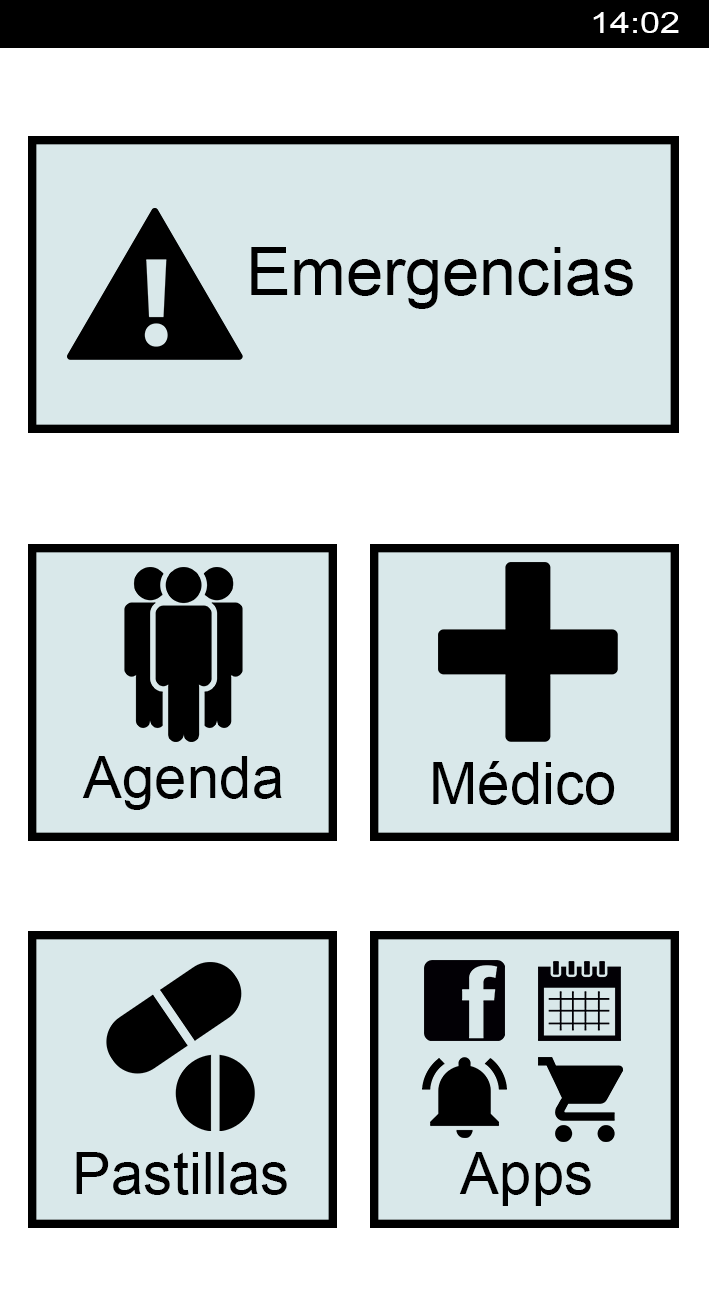
<style>
.page{position:relative;width:709px;height:1299px;background:#d9e8ea}
.page>*{position:absolute;margin:0}
.t1{font:29.2px "ArialMT";color:#ffffff;scale:1.22 1}
.t2{font:66.7px "ArialMT";color:#000000}
.t3{font:58.3px "ArialMT";color:#000000}
</style>
<div class="page">
<p class="t1" style="left:593px;top:12px;width:86px;height:21px">14:02</p>
<p class="t2" style="left:251px;top:247px;width:382px;height:62px">Emergencias</p>
<p class="t3" style="left:82px;top:756px;width:200px;height:54px">Agenda</p>
<p class="t3" style="left:433px;top:761px;width:182px;height:44px">Médico</p>
<p class="t3" style="left:76px;top:1152px;width:211px;height:43px">Pastillas</p>
<p class="t3" style="left:459px;top:1152px;width:132px;height:54px">Apps</p>
</div>
